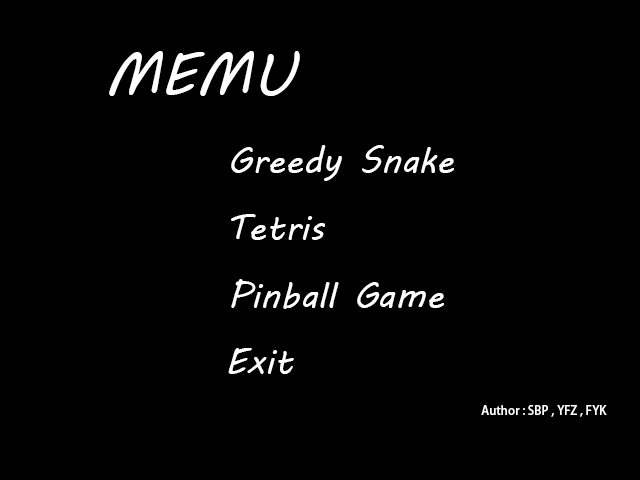
<style>
.page{position:relative;width:640px;height:480px;background:#000000}
.page>*{position:absolute;margin:0}
.t1{font:60px "MVBoli";color:#ffffff}
.t2{font:36px "MVBoli";color:#ffffff}
.t3{font:12px "AdobeHeitiStd-Regular";color:#ffffff}
</style>
<div class="page">
<p class="t1" style="left:109px;top:51px;width:191px;height:45px">MEMU</p>
<p class="t2" style="left:231px;top:145px;width:223px;height:36px">Greedy Snake</p>
<p class="t2" style="left:231px;top:214px;width:94px;height:26px">Tetris</p>
<p class="t2" style="left:231px;top:279px;width:213px;height:30px">Pinball Game</p>
<p class="t2" style="left:228px;top:348px;width:66px;height:26px">Exit</p>
<p class="t3" style="left:481px;top:405px;width:126px;height:12px">Author : SBP , YFZ , FYK</p>
</div>
